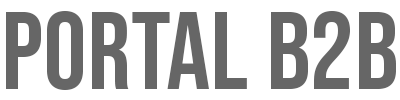
<style>
.page{position:relative;width:400px;height:100px;background:#ffffff}
.page>*{position:absolute;margin:0}
.t1{font:109.9px "BebasNeue-Regular";color:#666666}
</style>
<div class="page">
<p class="t1" style="left:6px;top:11px;width:390px;height:79px">Portal B2B</p>
</div>
